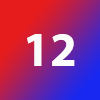
<style>
.page{position:relative;width:100px;height:100px}
.page>*{position:absolute;margin:0}
.t1{font:48px "MyriadPro-Bold";color:#fbfbfc}
</style>
<div class="page">
<p class="t1" style="left:27px;top:34px;width:48px;height:32px">12</p>
</div>
